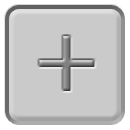
<style>
.page{position:relative;width:130px;height:130px;background:#cacaca}
.page>*{position:absolute;margin:0}
.t1{font:90px "Verdana"}
</style>
<div class="page">
<p class="t1" style="left:39px;top:36px;width:56px;height:55px">+</p>
</div>
